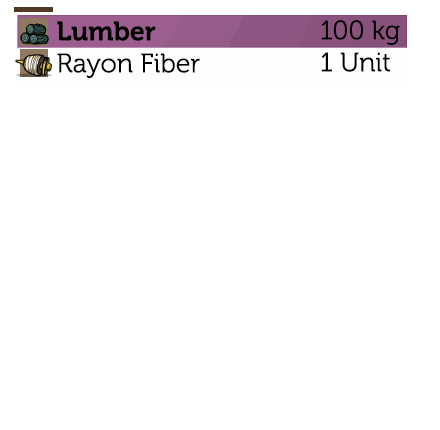
<style>
.page{position:relative;width:440px;height:430px;background:#ffffff}
.page>*{position:absolute;margin:0}
.t1{font:26.7px "Museo-300";color:#000000}
.t2{font:26.7px "Museo-700";color:#000000}
</style>
<div class="page">
<p class="t1" style="left:57px;top:21px;width:143px;height:57px"><span class="t2">Lumber<br></span>Rayon Fiber</p>
<p class="t1" style="left:321px;top:20px;width:79px;height:52px">100 kg<br>1 Unit</p>
</div>
